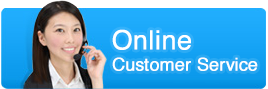
<style>
.page{position:relative;width:268px;height:89px}
.page>*{position:absolute;margin:0}
.t1{font:17.7px "Helvetica";color:#fdfeff;font-weight:bold}
.t2{font:26.5px "Helvetica";color:#fdfeff;font-weight:bold}
</style>
<div class="page">
<p class="t1" style="left:112px;top:29px;width:146px;height:42px"><span class="t2">Online <br></span>Customer Service</p>
</div>
